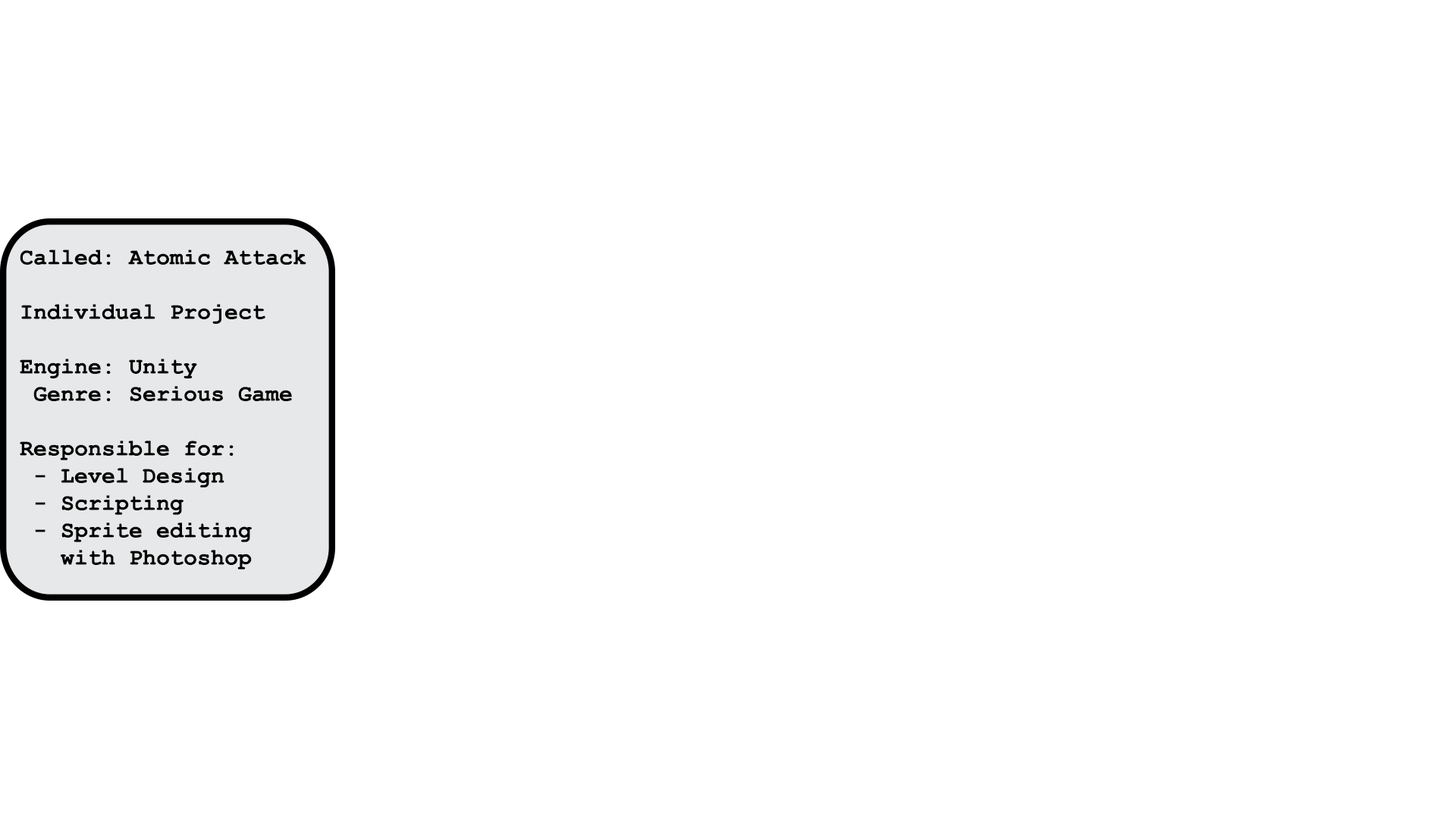
<style>
.page{position:relative;width:1456px;height:819px;background:#ffffff}
.page>*{position:absolute;margin:0}
.t1{font:22.7px "CourierNewPS-BoldMT";color:#000000}
</style>
<div class="page">
<p class="t1" style="left:20px;top:249px;width:286px;height:321px">Called: Atomic Attack<br><br>Individual Project<br><br>Engine: Unity<br> Genre: Serious Game<br><br>Responsible for:<br> - Level Design<br> - Scripting<br> - Sprite editing<br>   with Photoshop</p>
</div>
